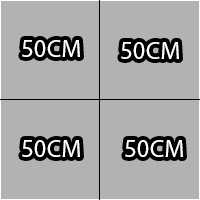
<style>
.page{position:relative;width:200px;height:200px;background:#b2b2b2}
.page>*{position:absolute;margin:0}
.t1{font:25px "MyriadPro-Regular";color:#ffffff}
</style>
<div class="page">
<p class="t1" style="left:22px;top:40px;width:58px;height:17px">50CM</p>
<p class="t1" style="left:121px;top:42px;width:58px;height:17px">50CM</p>
<p class="t1" style="left:22px;top:140px;width:58px;height:17px">50CM</p>
<p class="t1" style="left:125px;top:140px;width:58px;height:17px">50CM</p>
</div>
